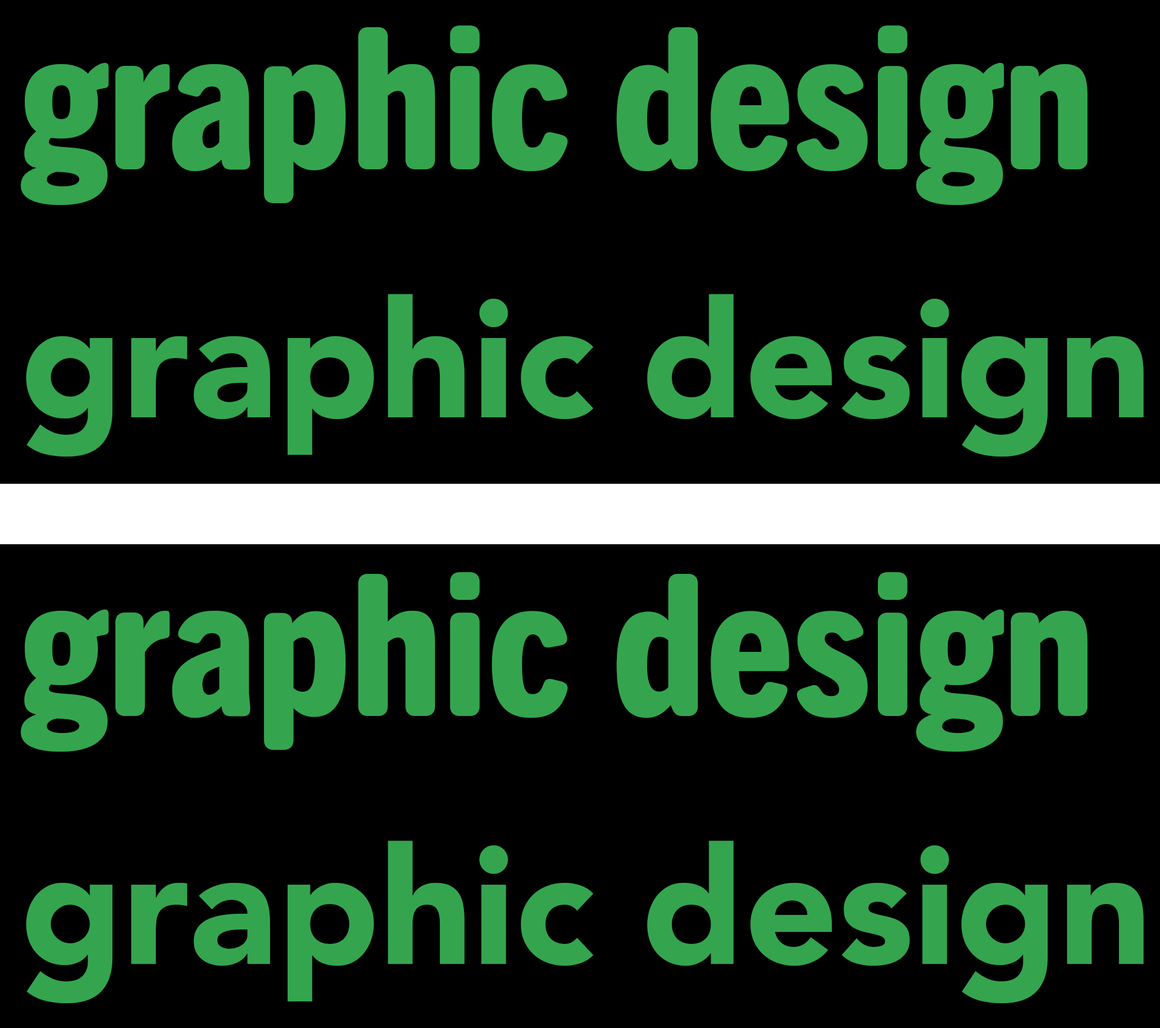
<style>
.page{position:relative;width:1160px;height:1028px;background:#000000}
.page>*{position:absolute;margin:0}
.t1{font:197.6px "TradeGothicNextSRPro-HvCn";color:#34a54e}
.t2{font:162.9px "Avenir-Black";color:#34a54e}
</style>
<div class="page">
<p class="t1" style="left:21px;top:25px;width:1067px;height:180px">graphic design</p>
<p class="t2" style="left:26px;top:294px;width:1118px;height:162px">graphic design</p>
<p class="t1" style="left:21px;top:572px;width:1067px;height:179px">graphic design</p>
<p class="t2" style="left:26px;top:840px;width:1118px;height:163px">graphic design</p>
</div>
